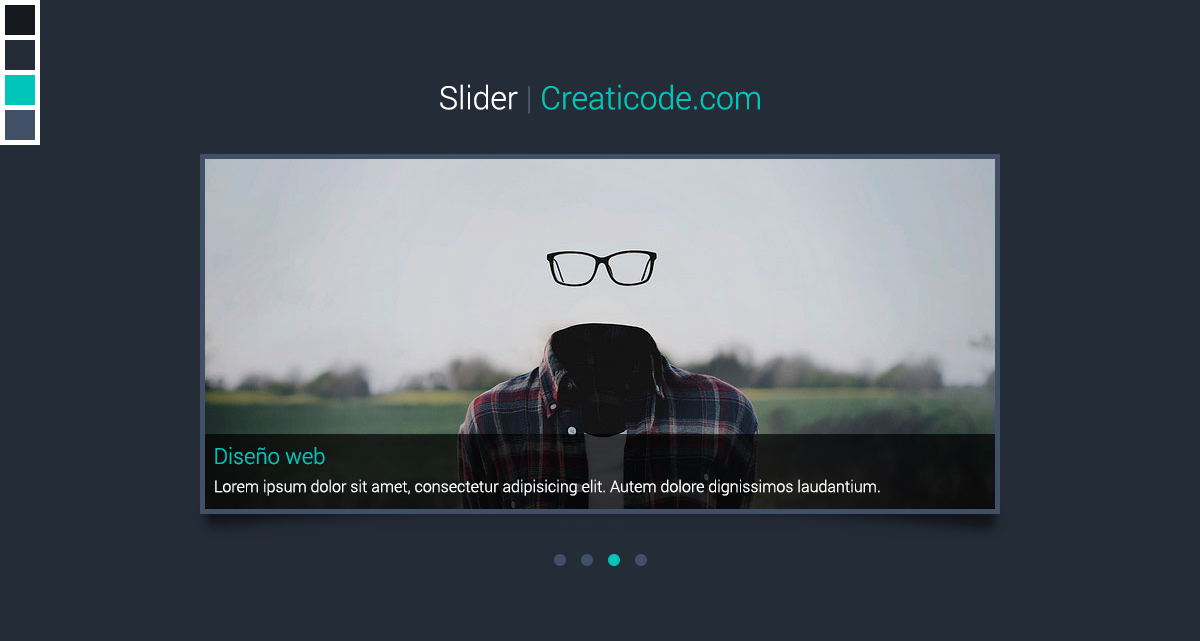
<style>
.page{position:relative;width:1200px;height:641px;background:#242c38}
.page>*{position:absolute;margin:0}
.t1{font:32px "Roboto-Light";color:#00c5b9}
.t2{font:32px "Roboto-Light";color:#ffffff}
.t3{font:32px "Roboto-Light";color:#4b5973}
.t4{font:22px "Roboto-Light";color:#00c5b9}
.t5{font:16px "Roboto-Light";color:#ffffff}
</style>
<div class="page">
<p class="t1" style="left:440px;top:84px;width:320px;height:30px"><span class="t2">Slider </span><span class="t3">| </span>Creaticode.com</p>
<p class="t4" style="left:215px;top:447px;width:110px;height:18px">Diseño web</p>
<p class="t5" style="left:215px;top:479px;width:665px;height:17px">Lorem ipsum dolor sit amet, consectetur adipisicing elit. Autem dolore dignissimos laudantium.</p>
</div>
